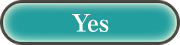
<style>
.page{position:relative;width:180px;height:45px;background:#239e9f}
.page>*{position:absolute;margin:0}
.t1{font:24px "RyuminPro-ExBold";letter-spacing:-0.04em;color:#fffffa}
</style>
<div class="page">
<p class="t1" style="left:72px;top:14px;width:37px;height:18px">Yes</p>
</div>
